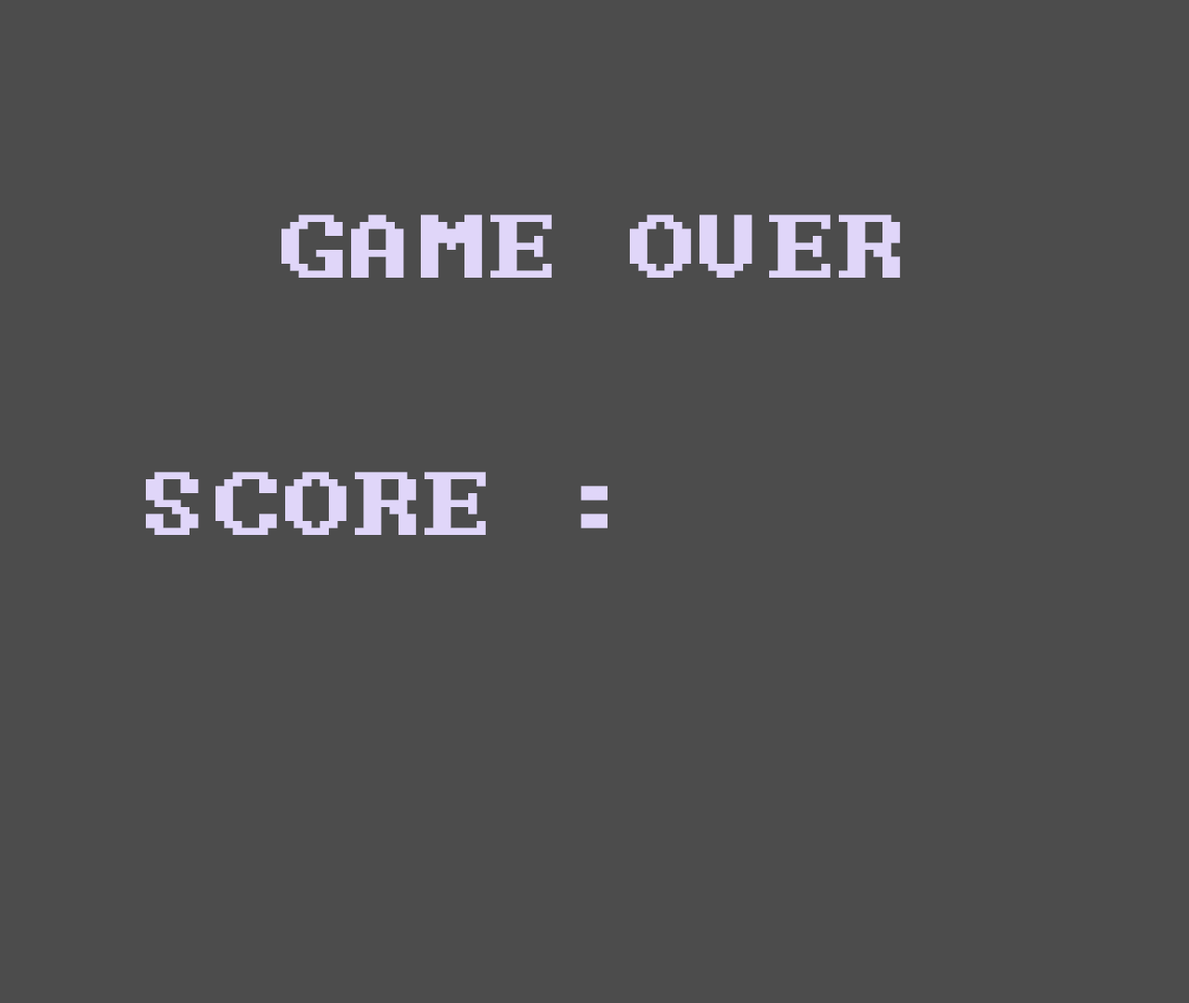
<style>
.page{position:relative;width:1189px;height:1003px;background:#4c4c4c}
.page>*{position:absolute;margin:0}
.t1{font:111.5px "Terminal";color:#e0d6f9}
</style>
<div class="page">
<p class="t1" style="left:281px;top:215px;width:619px;height:63px">GAME OVER</p>
<p class="t1" style="left:146px;top:472px;width:461px;height:63px">SCORE :</p>
</div>
